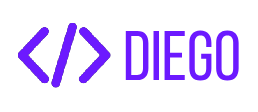
<style>
.page{position:relative;width:258px;height:112px;background:#ffffff}
.page>*{position:absolute;margin:0}
.t1{font:70px "BebasNeueRegular";color:#6c19ff}
</style>
<div class="page">
<p class="t1" style="left:125px;top:30px;width:114px;height:51px">Diego</p>
</div>
